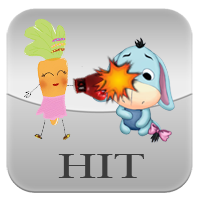
<style>
.page{position:relative;width:200px;height:200px}
.page>*{position:absolute;margin:0}
.t1{font:35px "TimesNewRomanPSMT";color:#3d3d3d;scale:1.5 1}
</style>
<div class="page">
<p class="t1" style="left:58px;top:154px;width:86px;height:24px">HIT</p>
</div>
